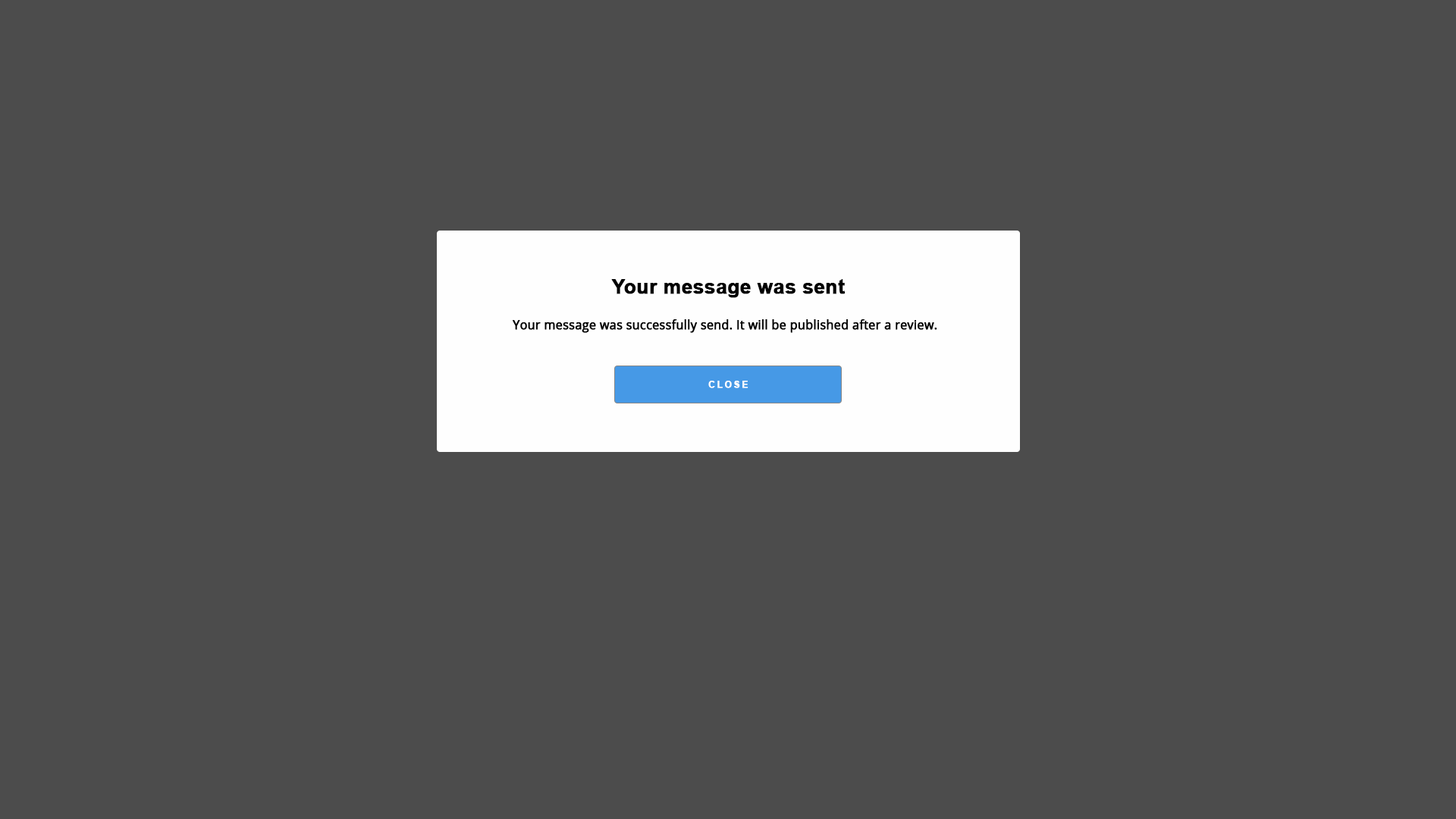
<style>
.page{position:relative;width:1456px;height:819px;background:#4c4c4c}
.page>*{position:absolute;margin:0}
.t1{font:19.7px "Arial-BoldMT";color:#000000;font-weight:bold}
.t2{font:12.1px "OpenSans-Regular";color:#000000;font-weight:bold}
.t3{font:9.1px "Arial-BoldMT";letter-spacing:0.2em;color:#ffffff;text-transform:uppercase;font-weight:bold}
</style>
<div class="page">
<p class="t1" style="left:611px;top:279px;width:235px;height:19px">Your message was sent</p>
<p class="t2" style="left:513px;top:319px;width:424px;height:14px">Your message was successfully send. It will be published after a review.</p>
<p class="t3" style="left:708px;top:381px;width:40px;height:7px">Close</p>
</div>
